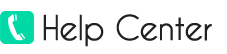
<style>
.page{position:relative;width:227px;height:54px;background:#ffffff}
.page>*{position:absolute;margin:0}
.t1{font:32px "CaviarDreams-Italic";letter-spacing:-0.034em;color:#222121;font-weight:bold}
</style>
<div class="page">
<p class="t1" style="left:43px;top:14px;width:169px;height:33px">Help Center</p>
</div>
